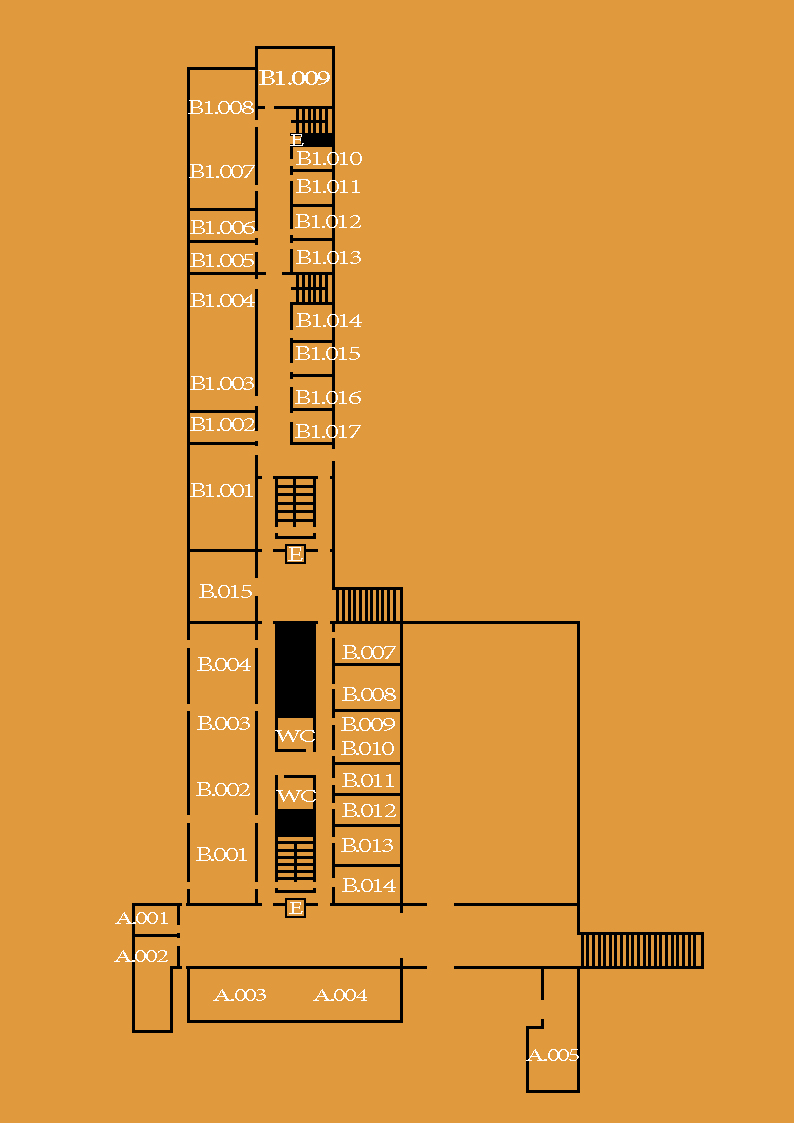
<style>
.page{position:relative;width:794px;height:1123px;background:#e0993d}
.page>*{position:absolute;margin:0}
.t1{font:22.1px "MinionPro-Regular";letter-spacing:-0.08em;color:#ffffff;scale:1.45 1}
.t2{font:20.2px "MinionPro-Regular";letter-spacing:-0.08em;color:#ffffff;scale:1.45 1}
.t3{font:18.4px "MinionPro-Regular";letter-spacing:-0.08em;color:#ffffff;scale:1.45 1}
</style>
<div class="page">
<p class="t1" style="left:259px;top:70px;width:71px;height:15px">B1.009</p>
<p class="t2" style="left:188px;top:100px;width:66px;height:14px">B1.008</p>
<p class="t3" style="left:290px;top:134px;width:14px;height:12px">E</p>
<p class="t2" style="left:296px;top:151px;width:66px;height:14px">B1.010</p>
<p class="t2" style="left:189px;top:164px;width:66px;height:14px">B1.007</p>
<p class="t2" style="left:296px;top:179px;width:64px;height:14px">B1.011</p>
<p class="t2" style="left:190px;top:220px;width:65px;height:14px">B1.006</p>
<p class="t2" style="left:295px;top:214px;width:66px;height:14px">B1.012</p>
<p class="t2" style="left:190px;top:253px;width:64px;height:14px">B1.005</p>
<p class="t2" style="left:296px;top:250px;width:65px;height:14px">B1.013</p>
<p class="t2" style="left:190px;top:293px;width:65px;height:14px">B1.004</p>
<p class="t2" style="left:296px;top:313px;width:66px;height:14px">B1.014</p>
<p class="t2" style="left:295px;top:346px;width:65px;height:14px">B1.015</p>
<p class="t2" style="left:190px;top:376px;width:64px;height:14px">B1.003</p>
<p class="t2" style="left:295px;top:390px;width:66px;height:14px">B1.016</p>
<p class="t2" style="left:190px;top:417px;width:65px;height:14px">B1.002</p>
<p class="t2" style="left:295px;top:424px;width:66px;height:14px">B1.017</p>
<p class="t2" style="left:190px;top:483px;width:63px;height:14px">B1.001</p>
<p class="t2" style="left:288px;top:547px;width:15px;height:14px">E</p>
<p class="t2" style="left:199px;top:584px;width:53px;height:14px">B.015</p>
<p class="t2" style="left:342px;top:645px;width:54px;height:14px">B.007</p>
<p class="t2" style="left:197px;top:657px;width:54px;height:14px">B.004</p>
<p class="t2" style="left:342px;top:687px;width:54px;height:14px">B.008</p>
<p class="t2" style="left:197px;top:716px;width:53px;height:14px">B.003</p>
<p class="t2" style="left:341px;top:717px;width:54px;height:14px">B.009</p>
<p class="t3" style="left:275px;top:730px;width:40px;height:12px">WC</p>
<p class="t2" style="left:341px;top:741px;width:53px;height:14px">B.010</p>
<p class="t2" style="left:342px;top:773px;width:52px;height:14px">B.011</p>
<p class="t2" style="left:196px;top:782px;width:54px;height:14px">B.002</p>
<p class="t3" style="left:276px;top:790px;width:40px;height:12px">WC</p>
<p class="t2" style="left:342px;top:803px;width:54px;height:14px">B.012</p>
<p class="t2" style="left:341px;top:838px;width:52px;height:14px">B.013</p>
<p class="t2" style="left:196px;top:847px;width:51px;height:14px">B.001</p>
<p class="t2" style="left:342px;top:878px;width:54px;height:14px">B.014</p>
<p class="t3" style="left:289px;top:902px;width:14px;height:12px">E</p>
<p class="t3" style="left:115px;top:912px;width:53px;height:12px">A.001</p>
<p class="t3" style="left:114px;top:950px;width:54px;height:12px">A.002</p>
<p class="t3" style="left:213px;top:989px;width:154px;height:12px">A.003            A.004</p>
<p class="t3" style="left:526px;top:1049px;width:53px;height:12px">A.005</p>
</div>
